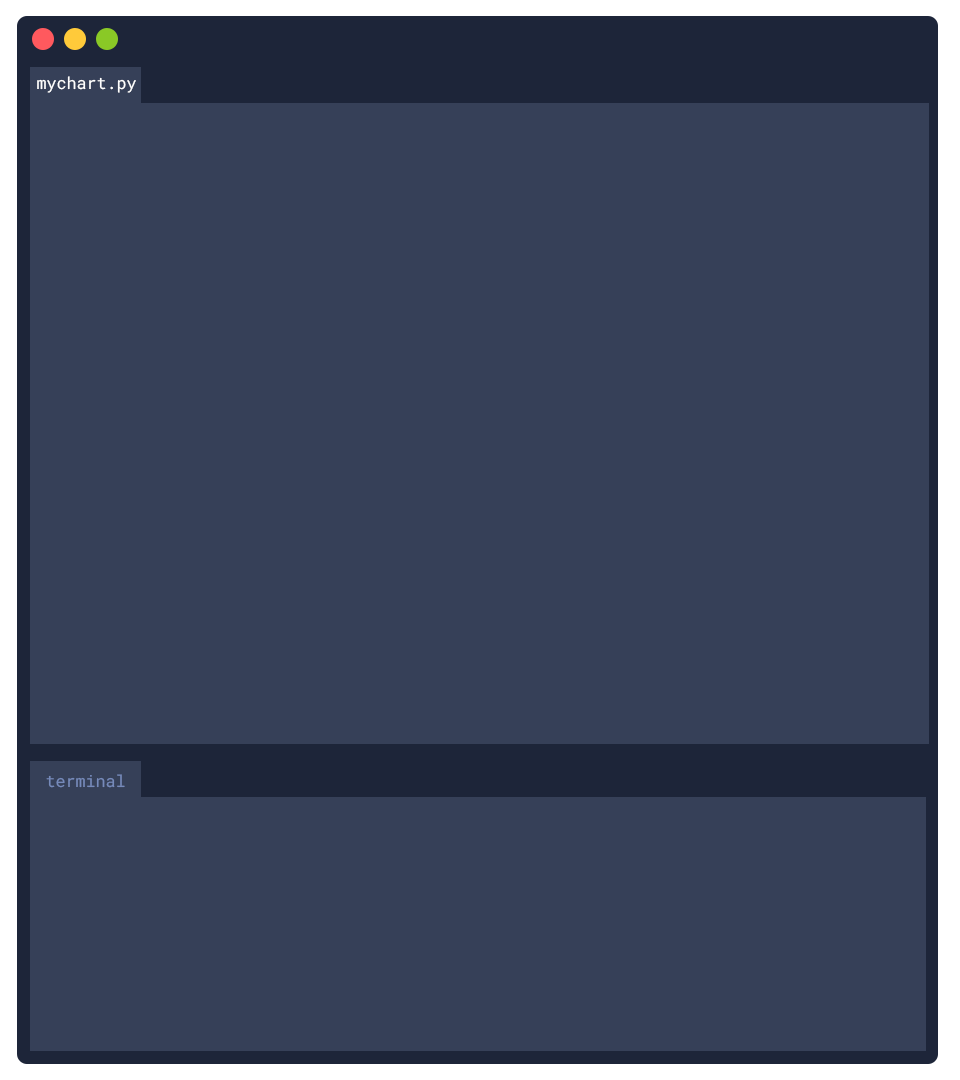
<style>
.page{position:relative;width:960px;height:1080px;background:#364058}
.page>*{position:absolute;margin:0}
.t1{font:16.7px "RobotoMono-Regular";color:#ffffff}
.t2{font:16.7px "RobotoMono-Regular";color:#768aba}
</style>
<div class="page">
<p class="t1" style="left:37px;top:76px;width:99px;height:17px">mychart.py</p>
<p class="t2" style="left:46px;top:774px;width:79px;height:14px">terminal</p>
</div>
